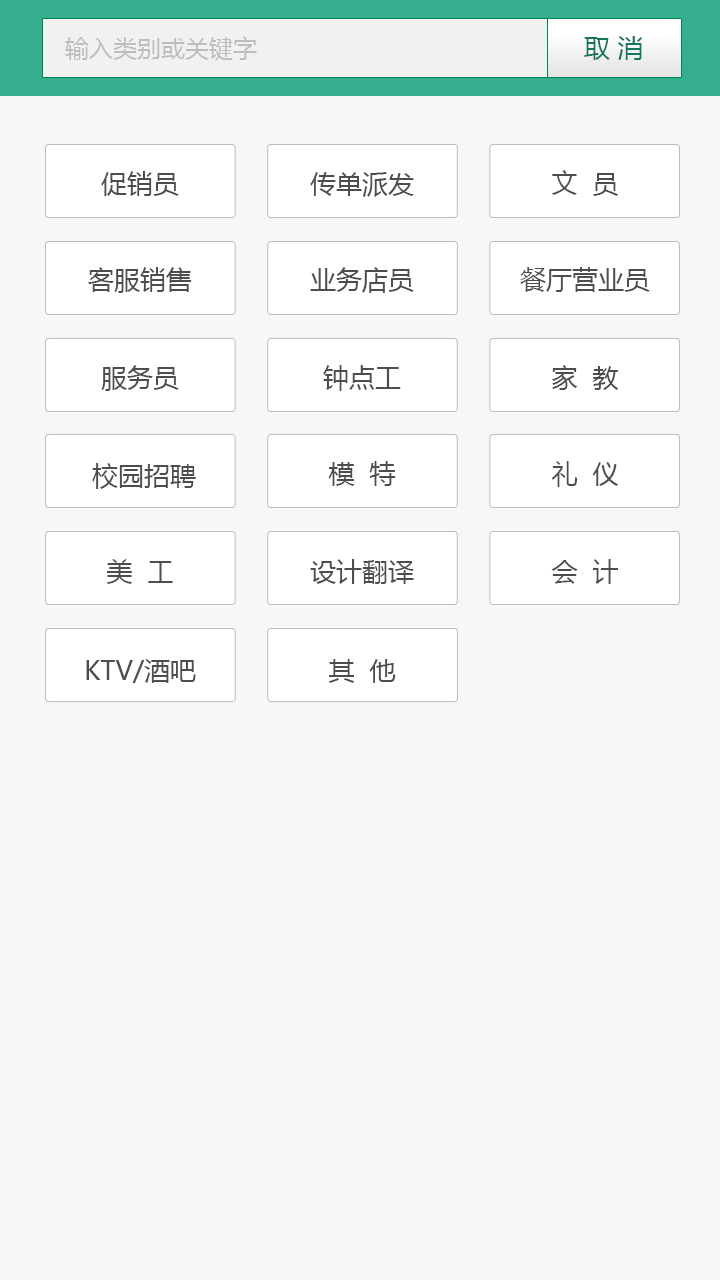
<style>
.page{position:relative;width:720px;height:1280px;background:#f7f7f7}
.page>*{position:absolute;margin:0}
.t1{font:24px "MicrosoftYaHei";color:#bdbdbd}
.t2{font:26px "MicrosoftYaHei";color:#12775d}
.t3{font:26px "MicrosoftYaHei";color:#4d4d4d}
</style>
<div class="page">
<p class="t1" style="left:65px;top:36px;width:192px;height:25px">输入类别或关键字</p>
<p class="t2" style="left:584px;top:36px;width:58px;height:24px">取 消</p>
<p class="t3" style="left:101px;top:171px;width:78px;height:25px">促销员</p>
<p class="t3" style="left:310px;top:172px;width:104px;height:25px">传单派发</p>
<p class="t3" style="left:552px;top:170px;width:66px;height:26px">文  员</p>
<p class="t3" style="left:88px;top:267px;width:104px;height:26px">客服销售</p>
<p class="t3" style="left:310px;top:267px;width:104px;height:26px">业务店员</p>
<p class="t3" style="left:520px;top:267px;width:130px;height:25px">餐厅营业员</p>
<p class="t3" style="left:101px;top:365px;width:78px;height:26px">服务员</p>
<p class="t3" style="left:323px;top:365px;width:78px;height:26px">钟点工</p>
<p class="t3" style="left:552px;top:365px;width:67px;height:25px">家  教</p>
<p class="t3" style="left:328px;top:461px;width:68px;height:25px">模  特</p>
<p class="t3" style="left:552px;top:461px;width:67px;height:26px">礼  仪</p>
<p class="t3" style="left:92px;top:463px;width:104px;height:26px">校园招聘</p>
<p class="t3" style="left:106px;top:559px;width:67px;height:25px">美  工</p>
<p class="t3" style="left:310px;top:559px;width:104px;height:25px">设计翻译</p>
<p class="t3" style="left:551px;top:559px;width:67px;height:25px">会  计</p>
<p class="t3" style="left:86px;top:659px;width:110px;height:24px">KTV/酒吧</p>
<p class="t3" style="left:328px;top:659px;width:68px;height:24px">其  他</p>
</div>
